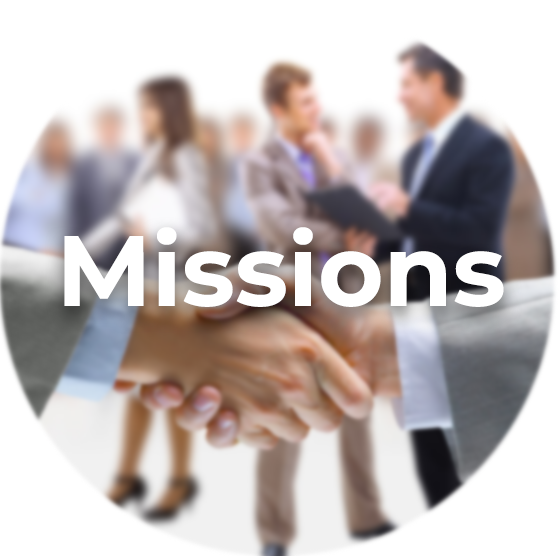
<style>
.page{position:relative;width:559px;height:556px;background:#ffffff}
.page>*{position:absolute;margin:0}
.t1{font:100px "Montserrat-Bold";color:#ffffff}
</style>
<div class="page">
<p class="t1" style="left:64px;top:227px;width:440px;height:80px">Missions</p>
</div>
